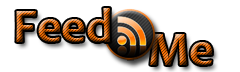
<style>
.page{position:relative;width:240px;height:72px;background:#ffffff}
.page>*{position:absolute;margin:0}
.t1{font:48px "Candara-Bold"}
</style>
<div class="page">
<p class="t1" style="left:16px;top:8px;width:95px;height:34px">Feed</p>
<p class="t1" style="left:150px;top:34px;width:62px;height:31px">Me</p>
</div>
